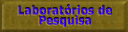
<style>
.page{position:relative;width:128px;height:32px}
.page>*{position:absolute;margin:0}
.t1{font:11.3px/9.9px "Tahoma-Bold";letter-spacing:0.04em}
.t2{font:11.3px/9.9px "Tahoma-Bold";letter-spacing:0.04em;color:#3908e7}
</style>
<div class="page">
<p class="t1" style="left:17px;top:6px;width:94px;height:22px;text-align:center">Laboratórios de<br>Pesquisa</p>
<p class="t1" style="left:18px;top:4px;width:94px;height:22px;text-align:center">Laboratórios de<br>Pesquisa</p>
<p class="t2" style="left:18px;top:5px;width:94px;height:22px;text-align:center">Laboratórios de<br>Pesquisa</p>
</div>
